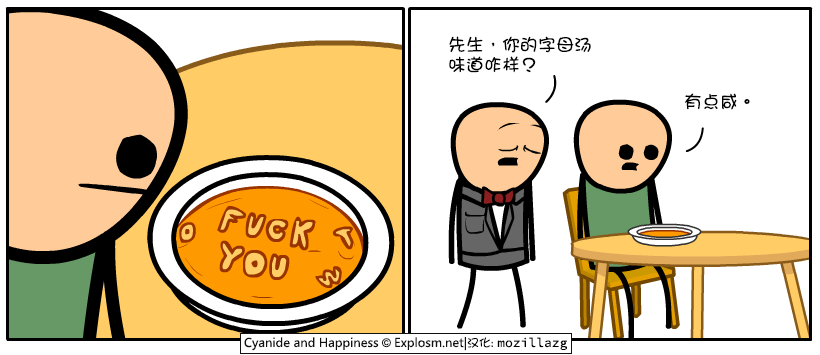
<style>
.page{position:relative;width:820px;height:355px;background:#ffffff}
.page>*{position:absolute;margin:0}
.t1{font:18px/20px "DFGirl";color:#000000}
.t2{font:18px "DFGirl";color:#000000}
</style>
<div class="page">
<p class="t1" style="left:449px;top:36px;width:142px;height:37px">先生，你的字母汤<br>味道咋样？</p>
<p class="t2" style="left:685px;top:93px;width:65px;height:17px">有点咸。</p>
</div>
